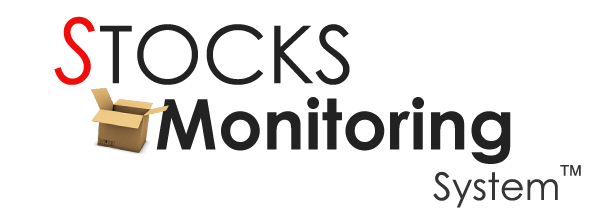
<style>
.page{position:relative;width:598px;height:212px;background:#ffffff}
.page>*{position:absolute;margin:0}
.t1{font:80px "CenturyGothic";color:#222222}
.t2{font:90px "CenturyGothic-Italic";color:#f20b0b}
.t3{font:70px "CenturyGothic-Bold";color:#222222}
.t4{font:38px "CenturyGothic";color:#373435}
.t5{font:15px "ArialMT";color:#373435}
</style>
<div class="page">
<p class="t1" style="left:54px;top:16px;width:296px;height:69px"><span class="t2">S</span>TOCKS</p>
<p class="t3" style="left:156px;top:97px;width:355px;height:67px">Monitoring</p>
<p class="t4" style="left:433px;top:171px;width:125px;height:37px">System</p>
<p class="t5" style="left:560px;top:165px;width:21px;height:11px">TM</p>
</div>
